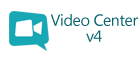
<style>
.page{position:relative;width:140px;height:60px;background:#ffffff}
.page>*{position:absolute;margin:0}
.t1{font:16px/16px "MicrosoftTaiLe";letter-spacing:-0.025em;color:#07636c}
</style>
<div class="page">
<p class="t1" style="left:50px;top:14px;width:88px;height:28px;text-align:center">Video Center<br>v4</p>
</div>
